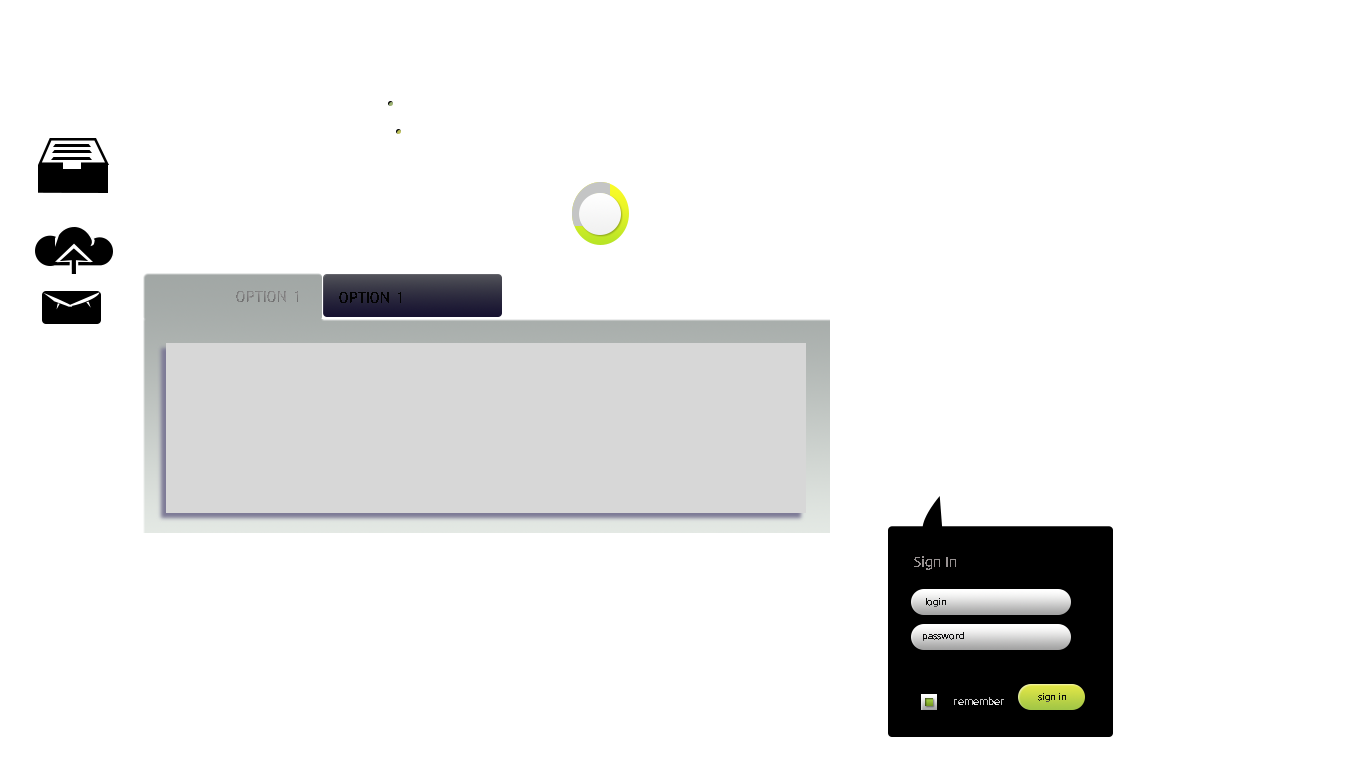
<style>
.page{position:relative;width:1366px;height:768px;background:#ffffff}
.page>*{position:absolute;margin:0}
.t1{font:16px "12LotteMartHLight";color:#858585}
.t2{font:16px "12LotteMartHLight";color:#030303}
.t3{font:15px "12LotteMartHLight";color:#999393}
.t4{font:10px "12LotteMartHLight";color:#030303}
.t5{font:11px "12LotteMartHLight";color:#cacaca}
</style>
<div class="page">
<p class="t1" style="left:236px;top:291px;width:62px;height:11px">OPTION 1</p>
<p class="t2" style="left:339px;top:292px;width:62px;height:11px">OPTION 1</p>
<p class="t3" style="left:914px;top:556px;width:42px;height:14px">Sign In</p>
<p class="t4" style="left:926px;top:598px;width:20px;height:9px">login</p>
<p class="t4" style="left:923px;top:632px;width:41px;height:9px">password</p>
<p class="t5" style="left:954px;top:697px;width:50px;height:8px">remember</p>
<p class="t4" style="left:1038px;top:693px;width:28px;height:9px">sign in</p>
</div>
